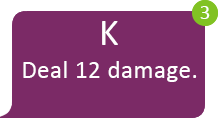
<style>
.page{position:relative;width:218px;height:118px;background:#7b2a66}
.page>*{position:absolute;margin:0}
.t1{font:20.8px "Calibri";letter-spacing:0.02em;color:#ffffff}
.t2{font:37.5px "Calibri";letter-spacing:0.02em;color:#ffffff}
.t3{font:25px "Calibri";letter-spacing:0.02em;color:#ffffff}
</style>
<div class="page">
<p class="t1" style="left:200px;top:6px;width:10px;height:13px">3</p>
<p class="t2" style="left:102px;top:21px;width:16px;height:24px">K</p>
<p class="t3" style="left:23px;top:61px;width:174px;height:21px">Deal 12 damage.</p>
</div>
